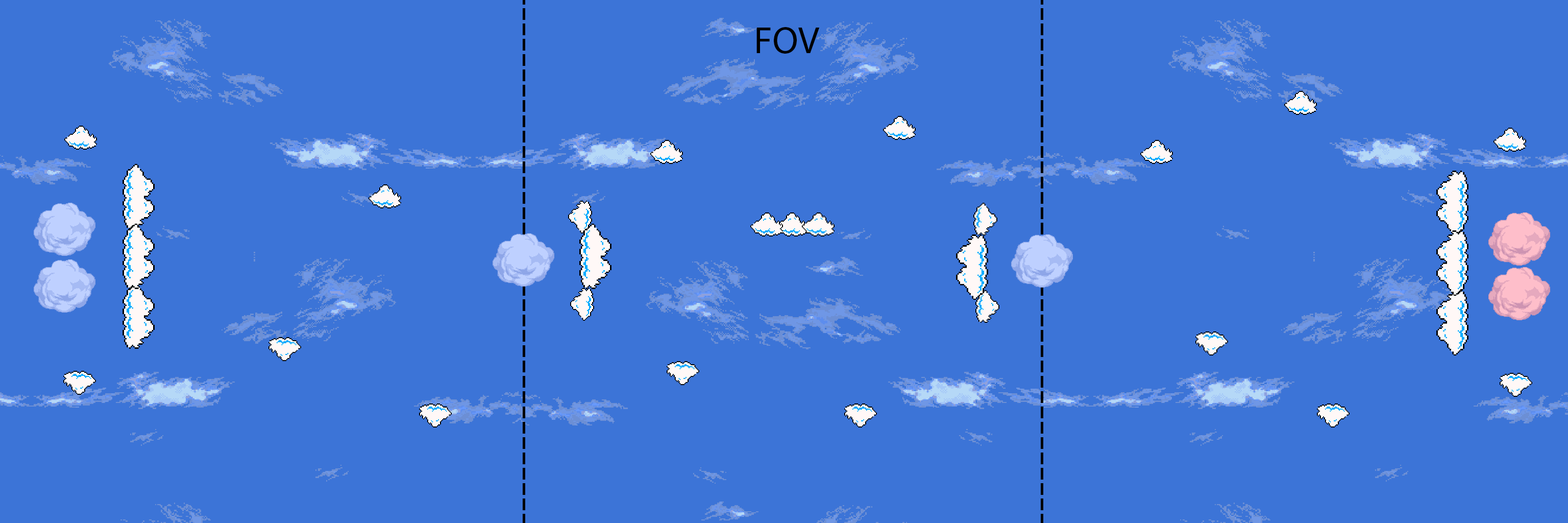
<style>
.page{position:relative;width:1568px;height:523px;background:#3c74d7}
.page>*{position:absolute;margin:0}
.t1{font:37.8px "MyriadPro-Regular";color:#000000}
</style>
<div class="page">
<p class="t1" style="left:756px;top:27px;width:64px;height:27px">FOV</p>
</div>
